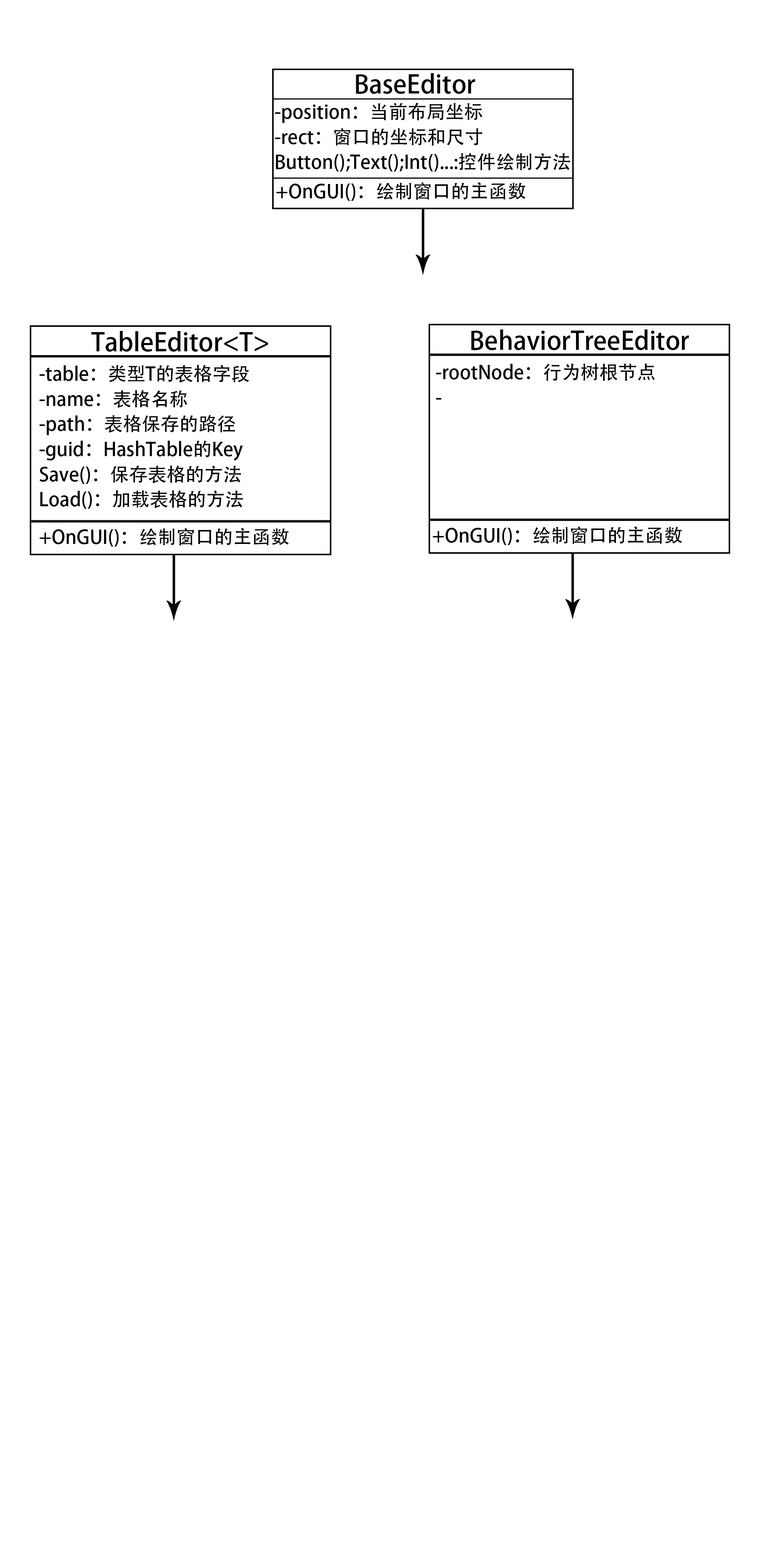
<style>
.page{position:relative;width:772px;height:1544px;background:#ffffff}
.page>*{position:absolute;margin:0}
.t1{font:25.1px "AdobeHeitiStd-Regular";color:#000000}
.t2{font:18.9px/25.1px "AdobeHeitiStd-Regular";color:#000000}
.t3{font:18.9px "AdobeHeitiStd-Regular";color:#000000}
</style>
<div class="page">
<p class="t1" style="left:356px;top:73px;width:119px;height:21px">BaseEditor</p>
<p class="t2" style="left:275px;top:103px;width:295px;height:69px">-position：当前布局坐标<br>-rect：窗口的坐标和尺寸<br>Button();Text();Int()...:控件绘制方法</p>
<p class="t3" style="left:276px;top:182px;width:250px;height:19px">+OnGUI()：绘制窗口的主函数</p>
<p class="t1" style="left:471px;top:330px;width:218px;height:20px">BehaviorTreeEditor</p>
<p class="t1" style="left:91px;top:331px;width:177px;height:21px">TableEditor&lt;T&gt;</p>
<p class="t2" style="left:40px;top:365px;width:209px;height:144px">-table：类型T的表格字段<br>-name：表格名称<br>-path：表格保存的路径<br>-guid：HashTable的Key<br>Save()：保存表格的方法<br>Load()：加载表格的方法</p>
<p class="t2" style="left:436px;top:363px;width:219px;height:37px">-rootNode：行为树根节点<br>-</p>
<p class="t3" style="left:40px;top:528px;width:249px;height:19px">+OnGUI()：绘制窗口的主函数</p>
<p class="t3" style="left:433px;top:526px;width:249px;height:19px">+OnGUI()：绘制窗口的主函数</p>
</div>
